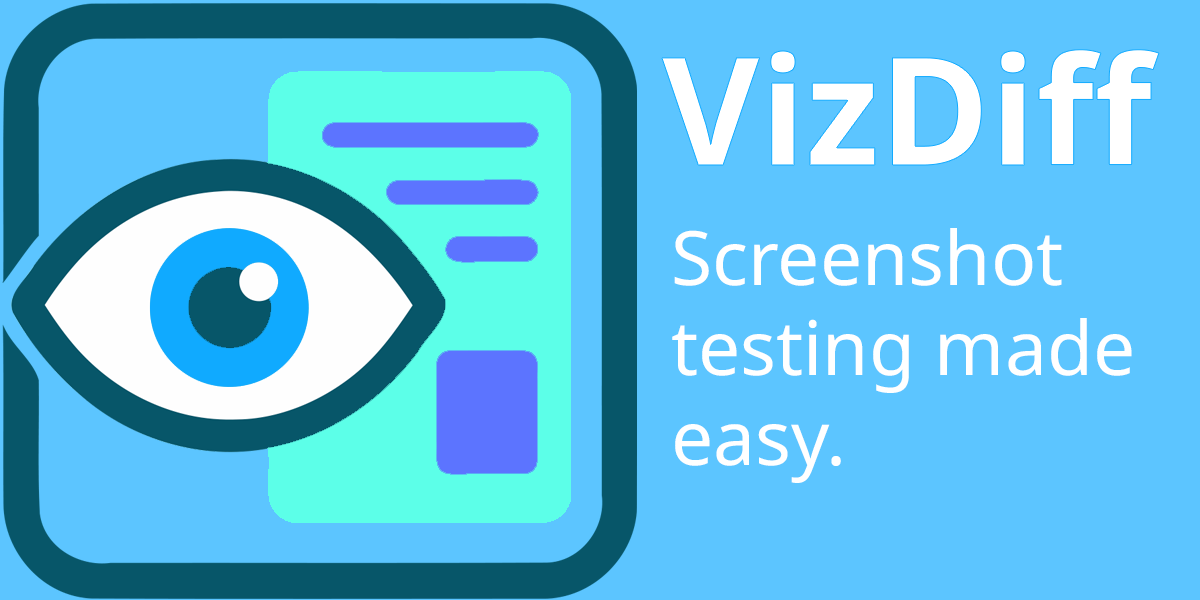
<style>
.page{position:relative;width:1200px;height:600px;background:#5cc5ff}
.page>*{position:absolute;margin:0}
.t1{font:150px "NotoSans-Bold";color:#ffffff}
.t2{font:75px "NotoSans-Regular";color:#ffffff}
</style>
<div class="page">
<p class="t1" style="left:662px;top:49px;width:497px;height:116px">VizDiff</p>
<p class="t2" style="left:672px;top:228px;width:460px;height:255px">Screenshot testing made easy.</p>
</div>
